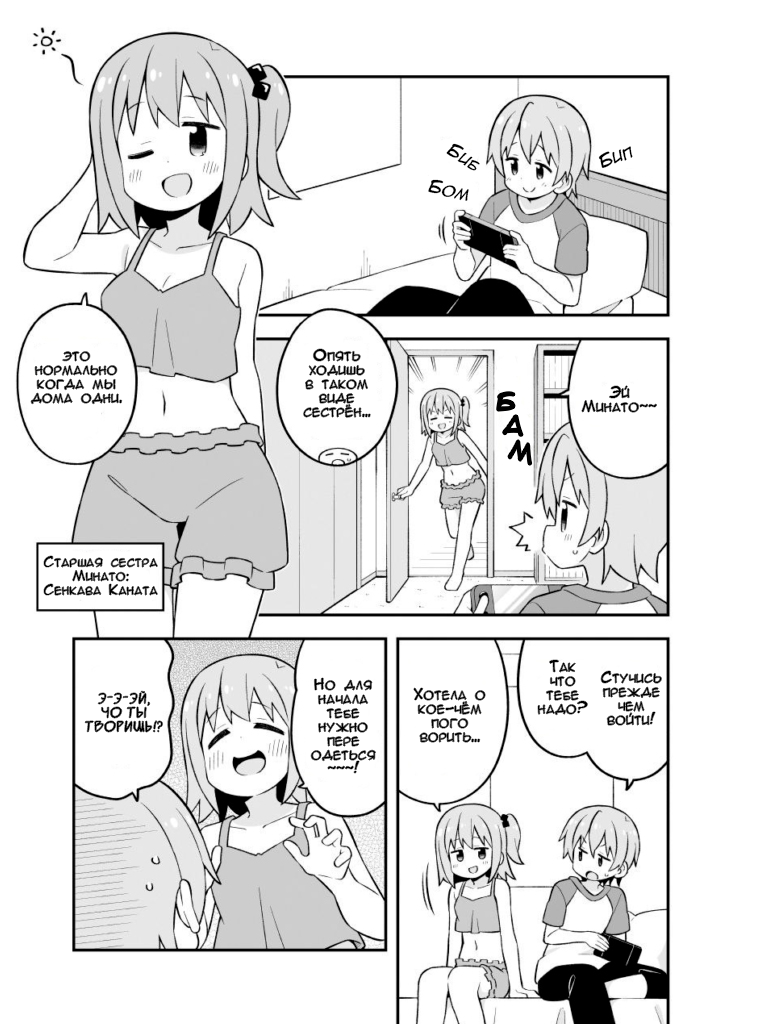
<style>
.page{position:relative;width:768px;height:1024px;background:#ffffff}
.page>*{position:absolute;margin:0}
.t1{font:18px "AnimeAcev3";color:#000000;font-style:italic}
.t2{font:14px/14px "AnimeAcev3";color:#000000}
.t3{font:24px/24px "AnimeAcev3";color:#000000;font-style:italic}
.t4{font:13px/14px "AnimeAcev3";color:#000000}
.t5{font:16px/14px "SuperWebcomicBros.Rusbyyakustick";color:#000000}
</style>
<div class="page">
<p class="t1" style="left:446px;top:143px;width:34px;height:28px;rotate:34deg">Биб</p>
<p class="t1" style="left:598px;top:146px;width:35px;height:22px;rotate:-20deg">Бип</p>
<p class="t1" style="left:428px;top:179px;width:41px;height:22px;rotate:15deg">Бом</p>
<p class="t2" style="left:31px;top:351px;width:91px;height:53px;text-align:center">это<br>нормально<br>когда мы<br>дома одни.</p>
<p class="t2" style="left:303px;top:349px;width:68px;height:69px;text-align:center">Опять<br>ходишь<br>в таком<br>виде<br>сестрён...</p>
<p class="t2" style="left:581px;top:385px;width:76px;height:28px;text-align:center">Эй<br>Минато~~</p>
<p class="t3" style="left:497px;top:392px;width:35px;height:73px;text-align:center">Б<br> А<br>  М</p>
<p class="t4" style="left:44px;top:556px;width:114px;height:40px;text-align:center">Старшая сестра<br>Минато:<br>Сенкава Каната</p>
<p class="t2" style="left:538px;top:660px;width:50px;height:55px;text-align:center">Так<br>что<br>тебе<br>надо?</p>
<p class="t2" style="left:311px;top:678px;width:65px;height:95px;text-align:center">Но для<br>начала<br>тебе<br>нужно<br>пере<br>одеться<br>~~~!</p>
<p class="t2" style="left:601px;top:671px;width:61px;height:55px;text-align:center">Стучись<br>прежде<br>чем<br>войти!</p>
<p class="t2" style="left:413px;top:688px;width:73px;height:55px;text-align:center">Хотела о<br>кое-чём<br>пого<br>ворить...</p>
<p class="t5" style="left:85px;top:691px;width:78px;height:42px;text-align:center">Э-э-эй,<br>чо ты<br>творишь!?</p>
</div>
